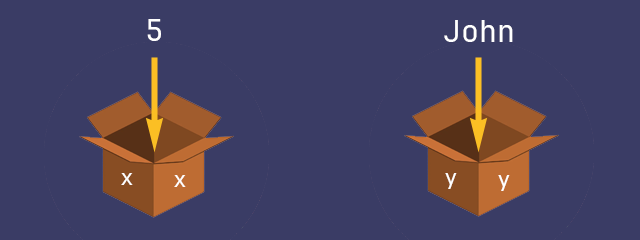
<style>
.page{position:relative;width:640px;height:240px;background:#3a3c65}
.page>*{position:absolute;margin:0}
.t1{font:30px "JetBrainsMono-Regular";color:#ffffff}
.t2{font:22px "JetBrainsMono-Regular";color:#ffffff}
</style>
<div class="page">
<p class="t1" style="left:147px;top:19px;width:14px;height:22px">5</p>
<p class="t1" style="left:444px;top:20px;width:69px;height:22px">John</p>
<p class="t2" style="left:121px;top:173px;width:12px;height:12px">x</p>
<p class="t2" style="left:445px;top:173px;width:12px;height:16px">y</p>
<p class="t2" style="left:174px;top:175px;width:12px;height:12px">x</p>
<p class="t2" style="left:498px;top:175px;width:12px;height:16px">y</p>
</div>
